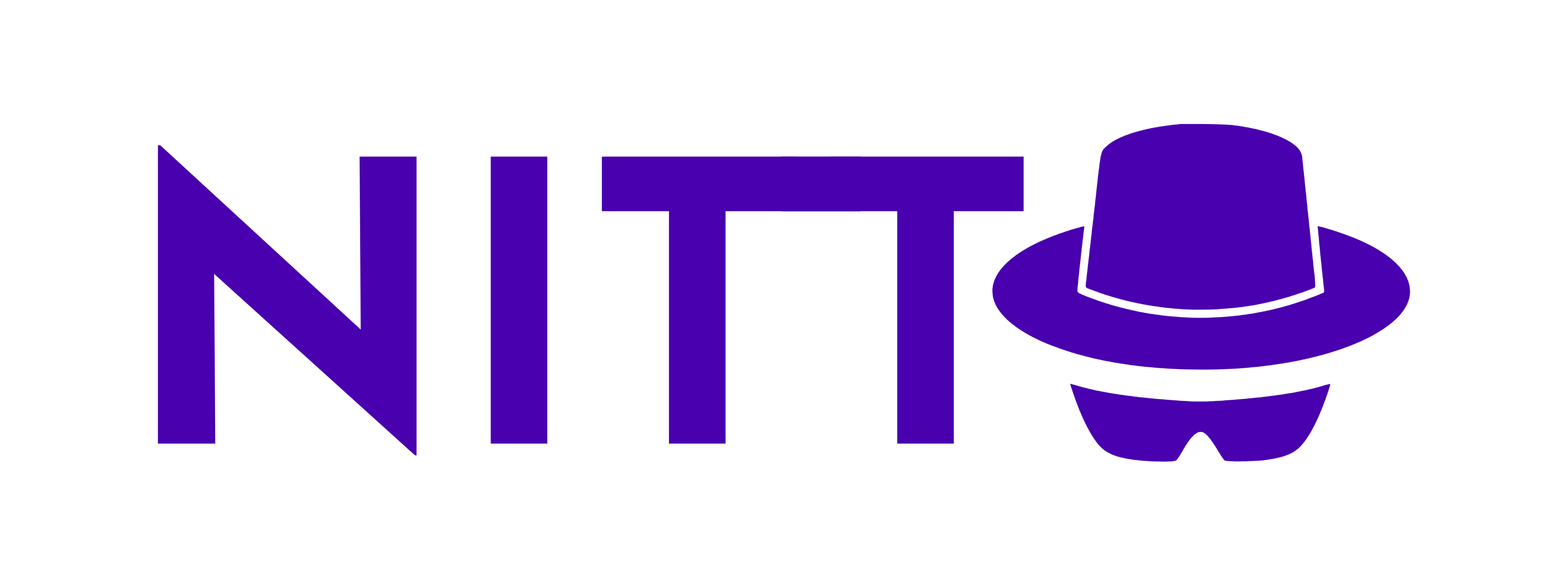
<style>
.page{position:relative;width:1568px;height:586px;background:#ffffff}
.page>*{position:absolute;margin:0}
.t1{font:390.2px "JosefinSansRoman-Bold";color:#4900af}
</style>
<div class="page">
<p class="t1" style="left:158px;top:145px;width:866px;height:311px">NITT</p>
</div>
